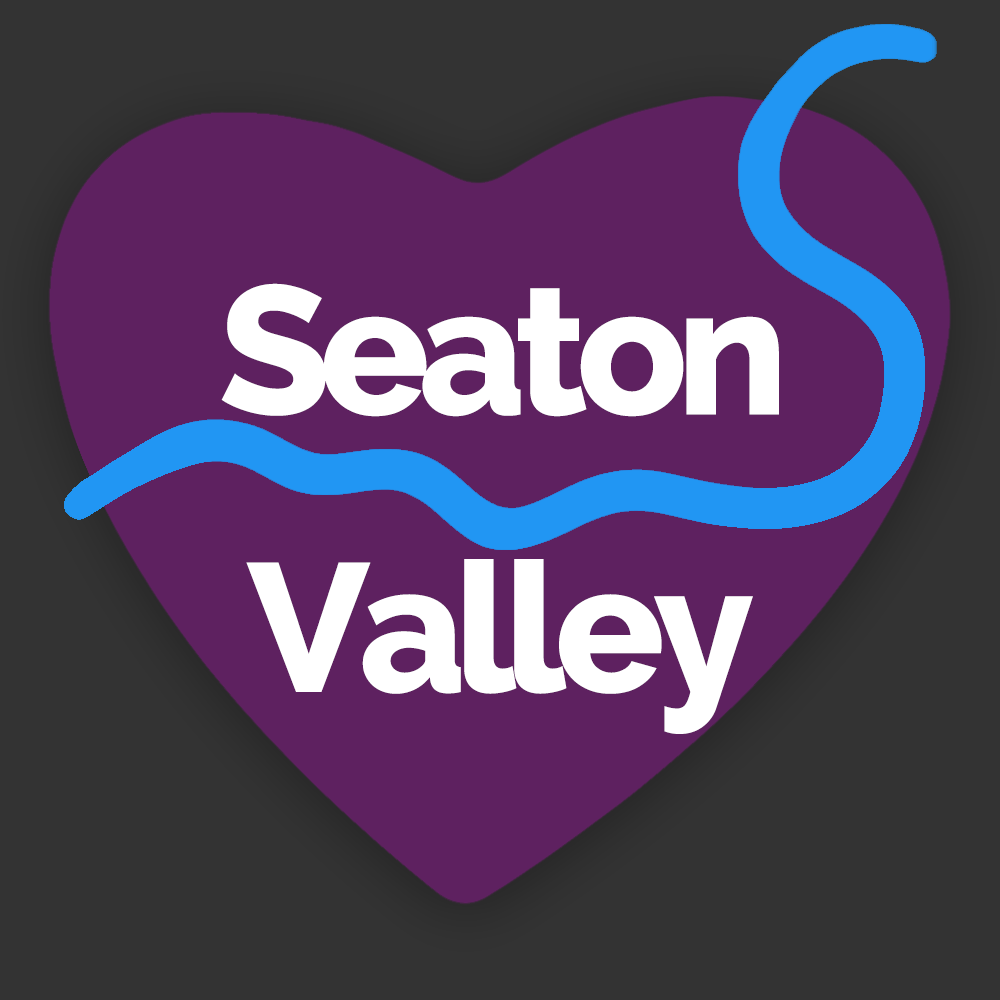
<style>
.page{position:relative;width:1000px;height:1000px;background:#5e2160}
.page>*{position:absolute;margin:0}
.t1{font:182px "Raleway-ExtraBold";letter-spacing:-0.06em;color:#ffffff}
</style>
<div class="page">
<p class="t1" style="left:221px;top:283px;width:558px;height:134px">Seaton</p>
<p class="t1" style="left:246px;top:559px;width:507px;height:175px">Valley</p>
</div>
